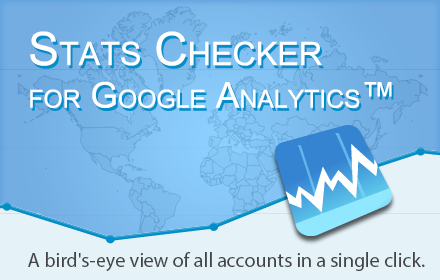
<style>
.page{position:relative;width:440px;height:280px;background:#e5f3f9}
.page>*{position:absolute;margin:0}
.t1{font:35.4px "ArialMT";color:#ffffff;font-variant:small-caps}
.t2{font:46.1px "ArialMT";color:#ffffff;font-variant:small-caps}
.t3{font:20px "MyriadPro-Regular";color:#434343}
</style>
<div class="page">
<p class="t1" style="left:30px;top:31px;width:362px;height:77px"><span class="t2">Stats Checker<br></span>for Google Analytics™</p>
<p class="t3" style="left:28px;top:252px;width:397px;height:19px">A bird's-eye view of all accounts in a single click.</p>
</div>
